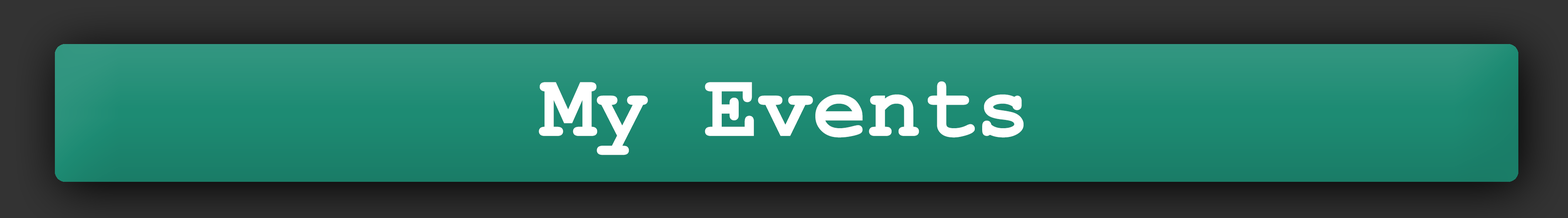
<style>
.page{position:relative;width:1568px;height:218px}
.page>*{position:absolute;margin:0}
.t1{font:90.6px "CourierNewPS-BoldMT";color:#ffffff}
</style>
<div class="page">
<p class="t1" style="left:539px;top:81px;width:485px;height:74px">My Events</p>
</div>
